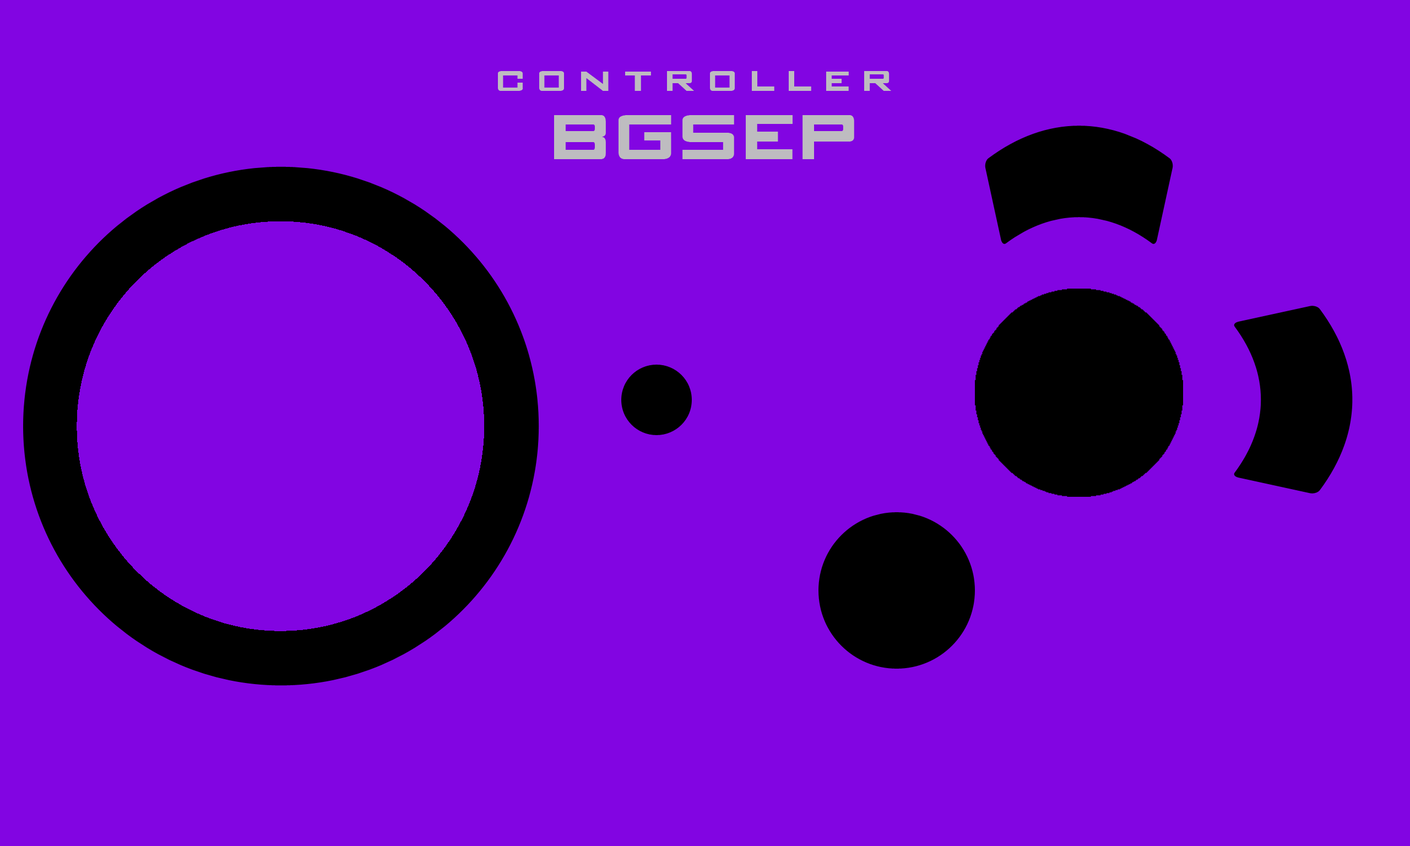
<style>
.page{position:relative;width:1410px;height:846px;background:#8205e2}
.page>*{position:absolute;margin:0}
.t1{font:24.2px "GAMECUBENDualSet";color:#bebcc0;text-transform:uppercase;scale:1.09 1}
.t2{font:55.1px "GAMECUBENDualSet";color:#bebcc0;text-transform:uppercase}
</style>
<div class="page">
<p class="t1" style="left:498px;top:71px;width:393px;height:20px">C O N T R O L L E R</p>
<p class="t2" style="left:554px;top:115px;width:300px;height:44px">BGSEP</p>
</div>
